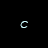
<style>
.page{position:relative;width:48px;height:48px;background:#000000}
.page>*{position:absolute;margin:0}
.t1{font:8.8px "AvantGardeLT-ExtraLightObl";color:#cdf8fd;text-transform:uppercase}
</style>
<div class="page">
<p class="t1" style="left:20px;top:21px;width:8px;height:7px">C</p>
</div>
